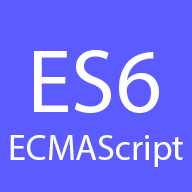
<style>
.page{position:relative;width:192px;height:192px;background:#5c5bff}
.page>*{position:absolute;margin:0}
.t1{font:90px "MyriadPro-Regular";color:#ffffff}
.t2{font:36px "MyriadPro-Regular";color:#ffffff}
</style>
<div class="page">
<p class="t1" style="left:34px;top:50px;width:125px;height:63px">ES6</p>
<p class="t2" style="left:10px;top:135px;width:173px;height:32px">ECMAScript</p>
</div>
